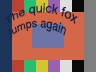
<style>
.page{position:relative;width:96px;height:72px;background:#d36747}
.page>*{position:absolute;margin:0}
.t1{font:11px "Helvetica";color:#16253f}
</style>
<div class="page">
<p class="t1" style="left:4px;top:3px;width:74px;height:36px">The quick fox<br>jumps again</p>
</div>
